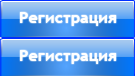
<style>
.page{position:relative;width:135px;height:76px}
.page>*{position:absolute;margin:0}
.t1{font:16px "TrebuchetMS-Bold";color:#ffffff}
</style>
<div class="page">
<p class="t1" style="left:20px;top:12px;width:97px;height:14px">Регистрация</p>
<p class="t1" style="left:20px;top:50px;width:97px;height:14px">Регистрация</p>
</div>
